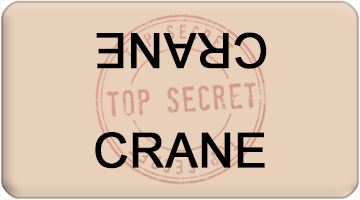
<style>
.page{position:relative;width:360px;height:200px;background:#e8d0bb}
.page>*{position:absolute;margin:0}
.t1{font:48px "ArialMT";color:#000000;font-weight:bold}
</style>
<div class="page">
<p class="t1" style="left:96px;top:32px;width:171px;height:37px;rotate:180deg">CRANE</p>
<p class="t1" style="left:95px;top:132px;width:170px;height:37px">CRANE</p>
</div>
